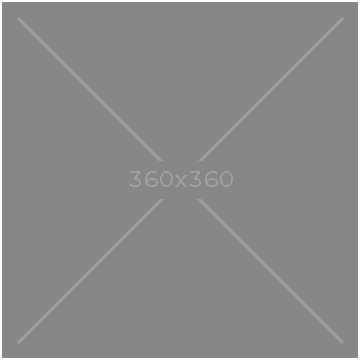
<style>
.page{position:relative;width:360px;height:360px;background:#878787}
.page>*{position:absolute;margin:0}
.t1{font:22px "Montserrat-Medium";letter-spacing:0.05em;color:#9f9f9f;scale:1.05 1}
</style>
<div class="page">
<p class="t1" style="left:129px;top:171px;width:104px;height:16px">360x360</p>
</div>
